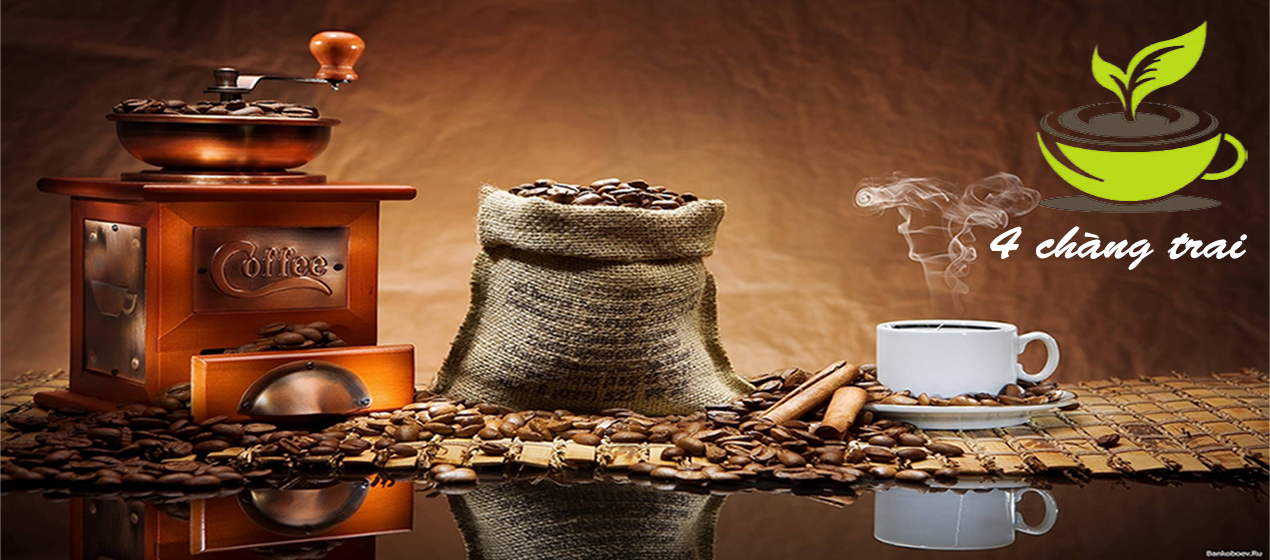
<style>
.page{position:relative;width:1270px;height:560px}
.page>*{position:absolute;margin:0}
.t1{font:47.7px "BrushScriptStd";color:#ffffff;scale:1.11 1}
</style>
<div class="page">
<p class="t1" style="left:990px;top:226px;width:257px;height:44px">4 chàng trai</p>
</div>
